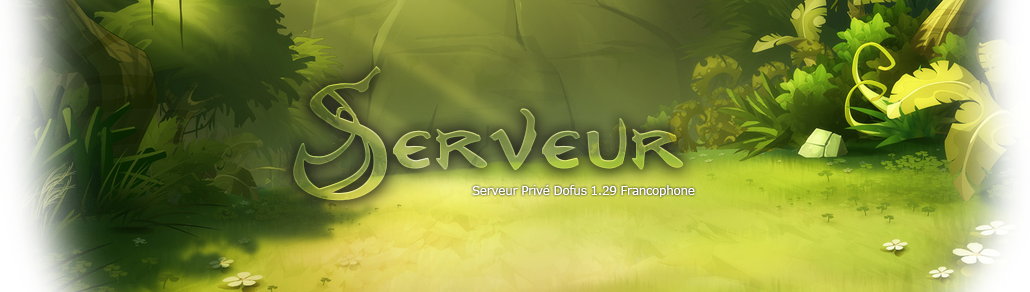
<style>
.page{position:relative;width:1030px;height:292px}
.page>*{position:absolute;margin:0}
.t1{font:12px "Verdana";letter-spacing:-0.025em;color:#ffffff}
</style>
<div class="page">
<p class="t1" style="left:472px;top:185px;width:223px;height:12px">Serveur Privé Dofus 1.29 Francophone</p>
</div>
